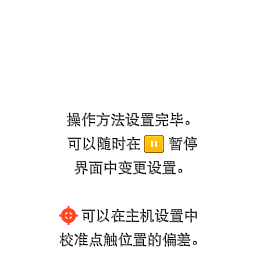
<style>
.page{position:relative;width:256px;height:256px;background:#ffffff}
.page>*{position:absolute;margin:0}
.t1{font:14.7px/24px "DFPHeiW5-GB"}
.t2{font:14.7px/24px "DFPHeiW5-GB";letter-spacing:1.56em}
</style>
<div class="page">
<p class="t1" style="left:59px;top:112px;width:138px;height:135px;text-align:center">操作方法设置完毕。<br>可以随时<span class="t2">在</span> 暂停<br>界面中变更设置。<br><br>   可以在主机设置中<br>校准点触位置的偏差。</p>
</div>
